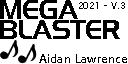
<style>
.page{position:relative;width:128px;height:64px;background:#ffffff}
.page>*{position:absolute;margin:0}
.t1{font:24px/20px "HighlandGothicFLF";color:#000000}
.t2{font:10px "LucidaSansUnicode";letter-spacing:0.002em;color:#000000;scale:0.9 1}
.t3{font:12.3px "SegoeUI-Semibold";color:#000000}
</style>
<div class="page">
<p class="t1" style="left:0px;top:0px;width:120px;height:39px">MEGA<br>BLASTER</p>
<p class="t2" style="left:79px;top:2px;width:46px;height:7px">2021 - V.3</p>
<p class="t3" style="left:39px;top:54px;width:88px;height:9px">Aidan Lawrence</p>
</div>
